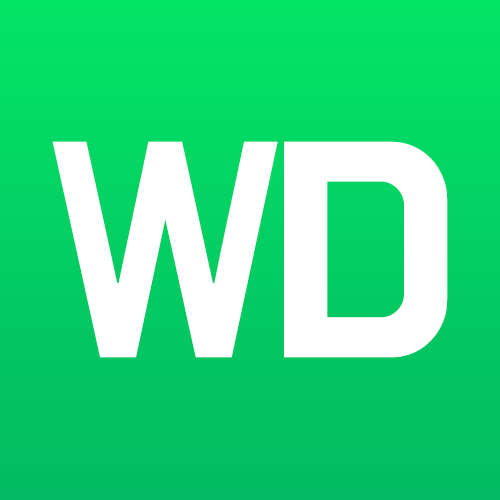
<style>
.page{position:relative;width:500px;height:500px}
.page>*{position:absolute;margin:0}
.t1{font:253px "BMDoHyeon";letter-spacing:-0.075em;color:#ffffff;scale:0.86 1}
.t2{font:253px "BMDoHyeon";letter-spacing:-0.075em;color:#ffffff;scale:1.09 1}
</style>
<div class="page">
<p class="t1" style="left:52px;top:141px;width:396px;height:217px">W<span class="t2">D</span></p>
</div>
